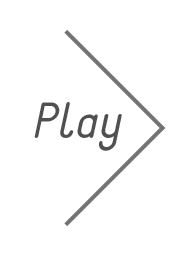
<style>
.page{position:relative;width:192px;height:256px;background:#ffffff}
.page>*{position:absolute;margin:0}
.t1{font:50px "StaticItalic";color:#515050}
</style>
<div class="page">
<p class="t1" style="left:34px;top:102px;width:88px;height:49px">Play</p>
</div>
